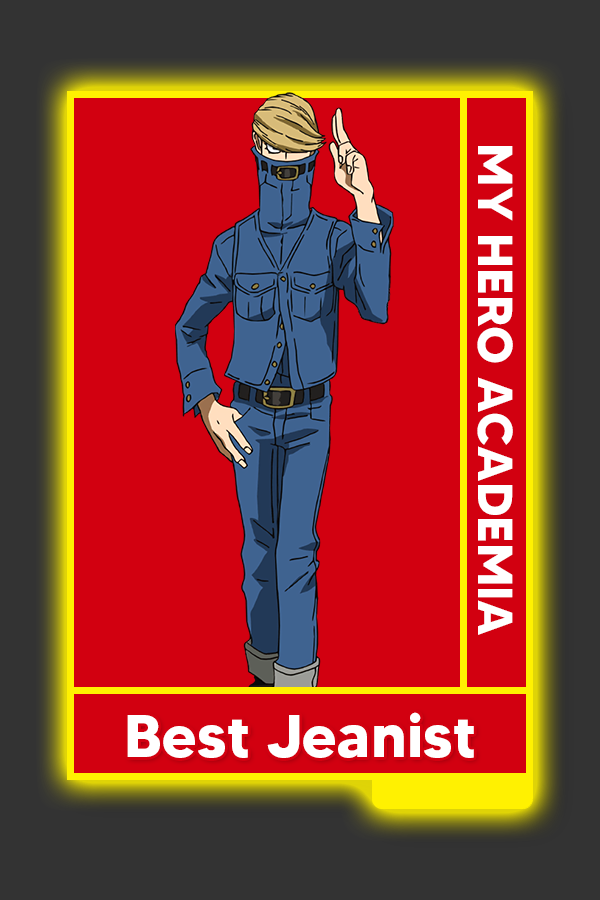
<style>
.page{position:relative;width:600px;height:900px;background:#d20010}
.page>*{position:absolute;margin:0}
.t1{font:48.8px "MADETOMMY-Bold";color:#ffffff}
.t2{font:60.3px "MADETOMMY-Bold";color:#ffffff}
</style>
<div class="page">
<p class="t1" style="left:477px;top:146px;width:36px;height:489px;rotate:90deg">MY HERO ACADEMIA</p>
<p class="t2" style="left:127px;top:712px;width:347px;height:46px">Best Jeanist</p>
</div>
